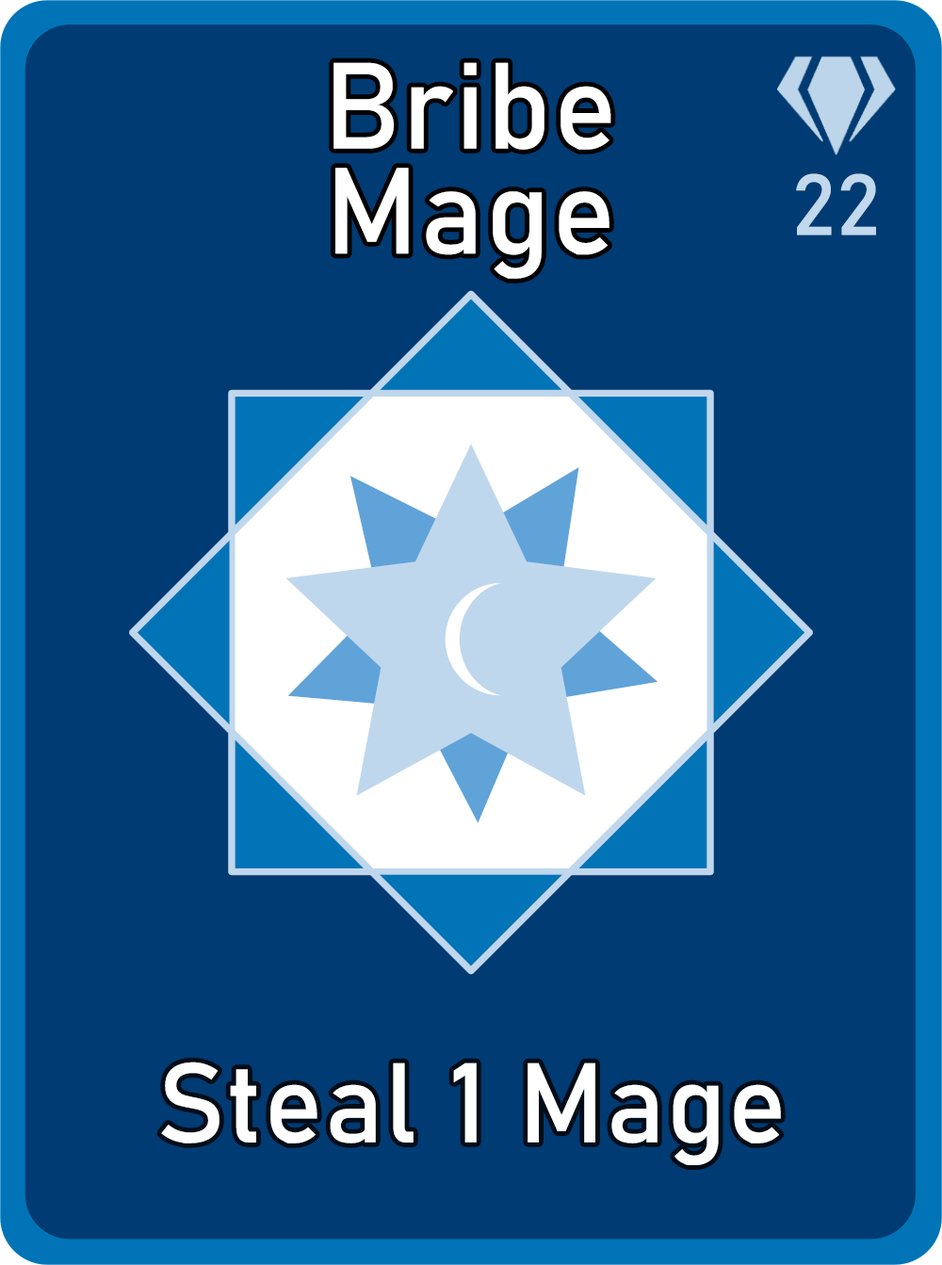
<style>
.page{position:relative;width:942px;height:1265px;background:#003b73}
.page>*{position:absolute;margin:0}
.t1{font:120.6px/105.1px "Bahnschrift";letter-spacing:0.01em;color:#ffffff}
.t2{font:85px "Bahnschrift";letter-spacing:0.01em;color:#c1d8ed}
.t3{font:111.3px "Bahnschrift";letter-spacing:0.01em;color:#ffffff}
</style>
<div class="page">
<p class="t1" style="left:334px;top:62px;width:278px;height:217px;text-align:center">Bribe<br>Mage</p>
<p class="t2" style="left:796px;top:173px;width:80px;height:63px">22</p>
<p class="t3" style="left:161px;top:1062px;width:620px;height:104px">Steal 1 Mage</p>
</div>
